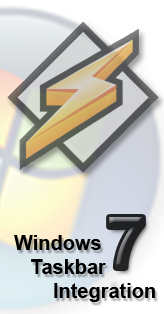
<style>
.page{position:relative;width:164px;height:314px}
.page>*{position:absolute;margin:0}
.t1{font:72px "Arial-BoldMT"}
.t2{font:20px "Arial-BoldMT";color:#000000}
</style>
<div class="page">
<p class="t1" style="left:109px;top:217px;width:34px;height:51px">7</p>
<p class="t2" style="left:14px;top:235px;width:141px;height:67px">Windows<br>   Taskbar <br>       Integration</p>
</div>
